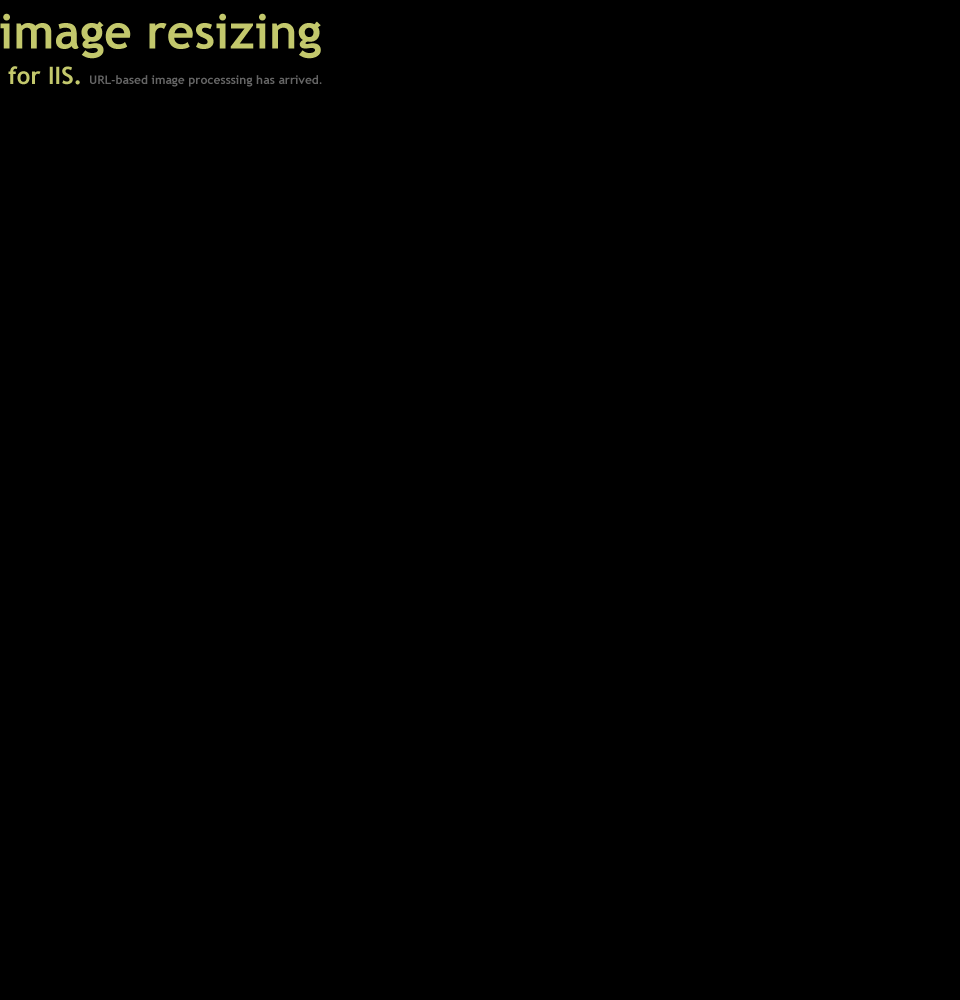
<style>
.page{position:relative;width:960px;height:1000px;background:#000000}
.page>*{position:absolute;margin:0}
.t1{font:48px "TrebuchetMS-Bold";color:#c3c86c}
.t2{font:24px "TrebuchetMS-Bold";color:#c3c86c}
.t3{font:12px "TrebuchetMS-Bold";color:#666666}
</style>
<div class="page">
<p class="t1" style="left:0px;top:13px;width:321px;height:46px">image resizing</p>
<p class="t2" style="left:8px;top:66px;width:72px;height:19px">for IIS.</p>
<p class="t3" style="left:90px;top:75px;width:232px;height:12px">URL-based image processsing has arrived.</p>
</div>
